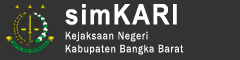
<style>
.page{position:relative;width:240px;height:60px;background:#333333}
.page>*{position:absolute;margin:0}
.t1{font:28.4px "Arial-BoldMT";letter-spacing:0.075em;color:#ffffff;scale:0.86 1}
.t2{font:11.2px "FranklinGothic-Book";letter-spacing:0.075em;color:#ffffff;scale:0.87 1}
</style>
<div class="page">
<p class="t1" style="left:65px;top:4px;width:112px;height:21px">simKARI</p>
<p class="t2" style="left:65px;top:31px;width:83px;height:11px">Kejaksaan Negeri</p>
<p class="t2" style="left:65px;top:44px;width:119px;height:11px">Kabupaten Bangka Barat</p>
</div>
